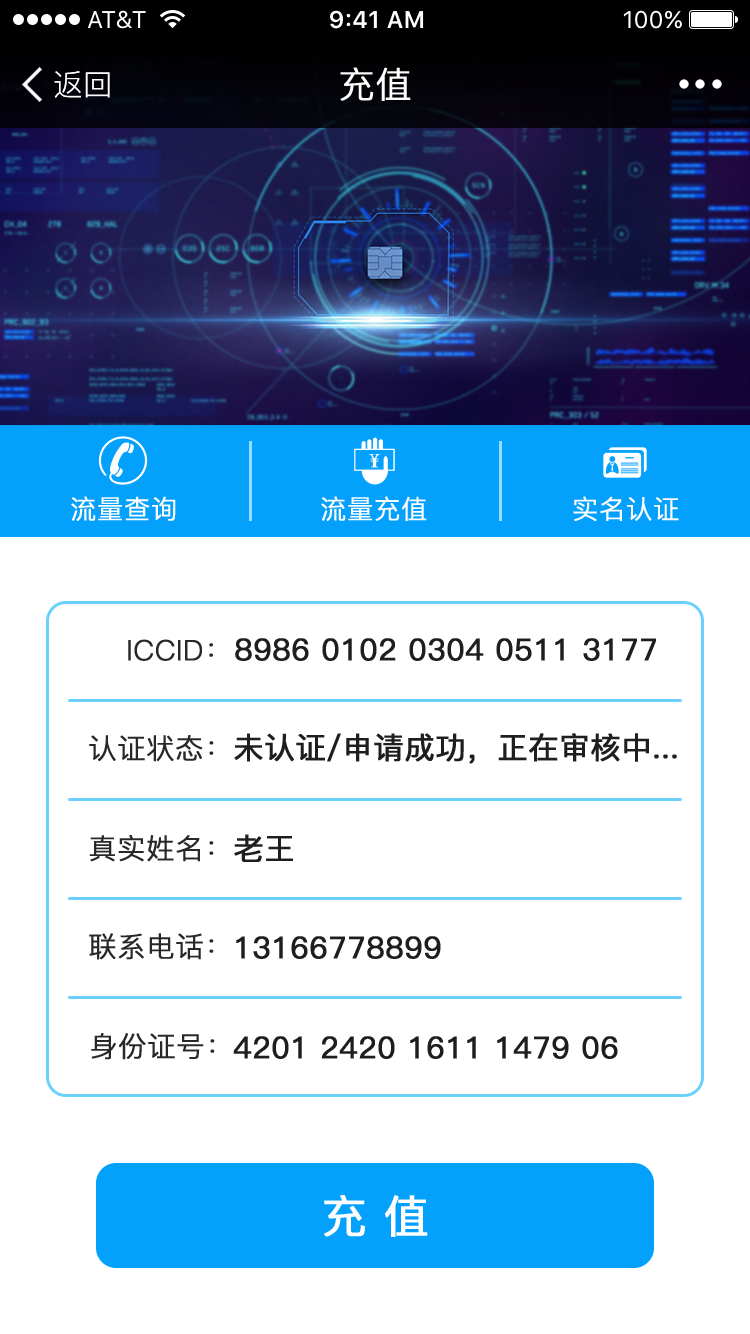
<style>
.page{position:relative;width:750px;height:1334px;background:#ffffff}
.page>*{position:absolute;margin:0}
.t1{font:30px "PingFang-SC-Regular";color:#fffefd}
.t2{font:36px "PingFang-SC-Regular";color:#fffefd;font-weight:bold}
.t3{font:26px "PingFang-SC-Regular";color:#fffefd;font-weight:bold}
.t4{font:28px "PingFang-SC-Regular";color:#282828;font-weight:bold}
.t5{font:30px "PingFang-SC-Medium";color:#1e1e1e;font-weight:bold}
.t6{font:45px "PingFang-SC-Medium";color:#ffffff;font-weight:bold}
</style>
<div class="page">
<p class="t1" style="left:54px;top:71px;width:56px;height:27px">返回</p>
<p class="t2" style="left:340px;top:67px;width:71px;height:34px">充值</p>
<p class="t3" style="left:71px;top:496px;width:105px;height:25px">流量查询</p>
<p class="t3" style="left:321px;top:496px;width:106px;height:25px">流量充值</p>
<p class="t3" style="left:573px;top:496px;width:106px;height:25px">实名认证</p>
<p class="t4" style="left:128px;top:639px;width:85px;height:22px">ICCID：</p>
<p class="t5" style="left:235px;top:638px;width:421px;height:23px">8986 0102 0304 0511 3177</p>
<p class="t4" style="left:89px;top:735px;width:125px;height:27px">认证状态：</p>
<p class="t5" style="left:234px;top:733px;width:443px;height:31px">未认证/申请成功，正在审核中...</p>
<p class="t4" style="left:89px;top:835px;width:125px;height:27px">真实姓名：</p>
<p class="t5" style="left:234px;top:834px;width:59px;height:28px">老王</p>
<p class="t4" style="left:89px;top:933px;width:125px;height:27px">联系电话：</p>
<p class="t5" style="left:236px;top:936px;width:205px;height:23px">13166778899</p>
<p class="t4" style="left:91px;top:1033px;width:124px;height:27px">身份证号：</p>
<p class="t5" style="left:233px;top:1036px;width:385px;height:23px">4201 2420 1611 1479 06</p>
<p class="t6" style="left:324px;top:1195px;width:104px;height:42px">充 值</p>
</div>
